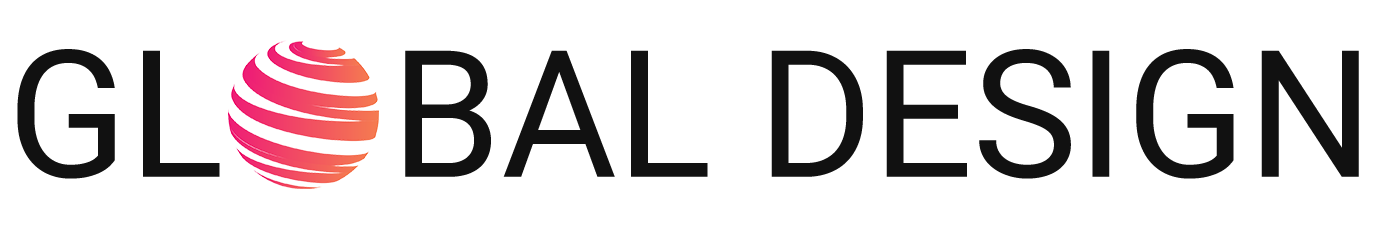
<style>
.page{position:relative;width:1376px;height:228px;background:#ffffff}
.page>*{position:absolute;margin:0}
.t1{font:176.9px "Roboto-Regular";color:#111111;text-transform:uppercase}
</style>
<div class="page">
<p class="t1" style="left:17px;top:49px;width:1342px;height:130px">Gl   bal Design</p>
</div>
